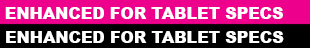
<style>
.page{position:relative;width:310px;height:48px;background:#000000}
.page>*{position:absolute;margin:0}
.t1{font:16px "Arial-Black";letter-spacing:-0.005em;color:#ffffff}
</style>
<div class="page">
<p class="t1" style="left:5px;top:7px;width:278px;height:12px">ENHANCED FOR TABLET SPECS</p>
<p class="t1" style="left:6px;top:31px;width:278px;height:12px">ENHANCED FOR TABLET SPECS</p>
</div>
